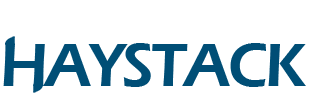
<style>
.page{position:relative;width:312px;height:95px;background:#ffffff}
.page>*{position:absolute;margin:0}
.t1{font:63.3px "ErasITC-Demi";letter-spacing:-0.05em;color:#004e76}
</style>
<div class="page">
<p class="t1" style="left:3px;top:43px;width:303px;height:44px">HAYSTACK</p>
</div>
